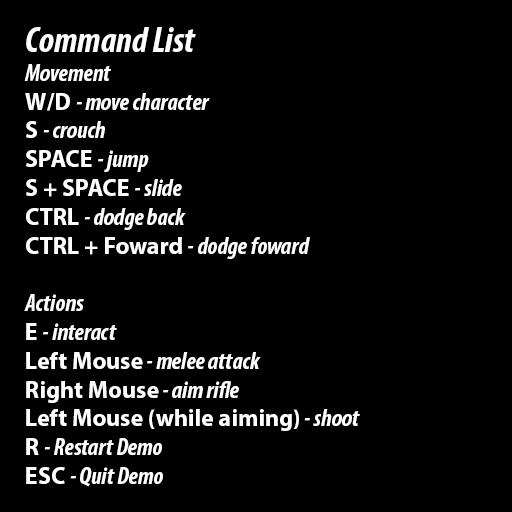
<style>
.page{position:relative;width:512px;height:512px;background:#000000}
.page>*{position:absolute;margin:0}
.t1{font:24px "MyriadPro-Bold";color:#ffffff}
.t2{font:36px "MyriadPro-BoldCondIt";color:#ffffff}
.t3{font:24px "MyriadPro-BoldCondIt";color:#ffffff}
</style>
<div class="page">
<p class="t1" style="left:24px;top:27px;width:336px;height:460px"><span class="t2">Command List<br></span><span class="t3">Movement<br></span>W/D <span class="t3">- move character<br></span>S <span class="t3">- crouch<br></span>SPACE <span class="t3">- jump<br></span>S + SPACE <span class="t3">- slide<br></span>CTRL <span class="t3">- dodge back<br></span>CTRL + Foward <span class="t3">- dodge foward<br><br>Actions<br></span>E <span class="t3">- interact<br></span>Left Mouse<span class="t3"> - melee attack<br></span>Right Mouse<span class="t3"> - aim rifle<br></span>Left Mouse (while aiming)<span class="t3"> - shoot<br></span>R <span class="t3">- Restart Demo<br></span>ESC <span class="t3">- Quit Demo</span></p>
</div>
